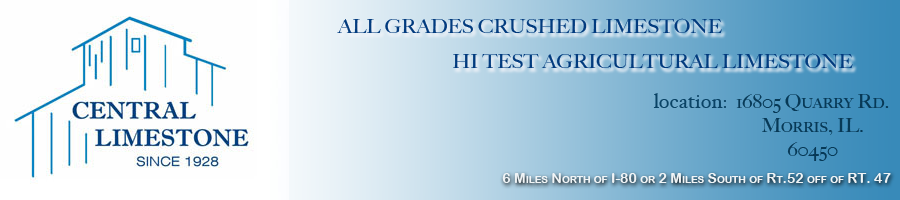
<style>
.page{position:relative;width:900px;height:200px}
.page>*{position:absolute;margin:0}
.t1{font:20px "BigCaslon-Medium";color:#023b7e;text-transform:uppercase}
.t2{font:20px "HoeflerText-Regular";color:#0a4365}
.t3{font:20px "BigCaslon-Medium";color:#073956;font-variant:small-caps}
.t4{font:14px "ArialRoundedMTBold";color:#f0f4f6;font-variant:small-caps}
</style>
<div class="page">
<p class="t1" style="left:337px;top:18px;width:385px;height:15px">all grades crushed limestone</p>
<p class="t1" style="left:453px;top:53px;width:400px;height:15px">hi test agricultural limestone</p>
<p class="t2" style="left:653px;top:93px;width:73px;height:15px">location:</p>
<p class="t3" style="left:736px;top:94px;width:153px;height:67px;text-align:center">16805 Quarry Rd.<br>Morris, IL.<br>60450</p>
<p class="t4" style="left:502px;top:173px;width:389px;height:10px">6 Miles North of I-80 or 2 Miles South of Rt.52 off of RT. 47</p>
</div>
